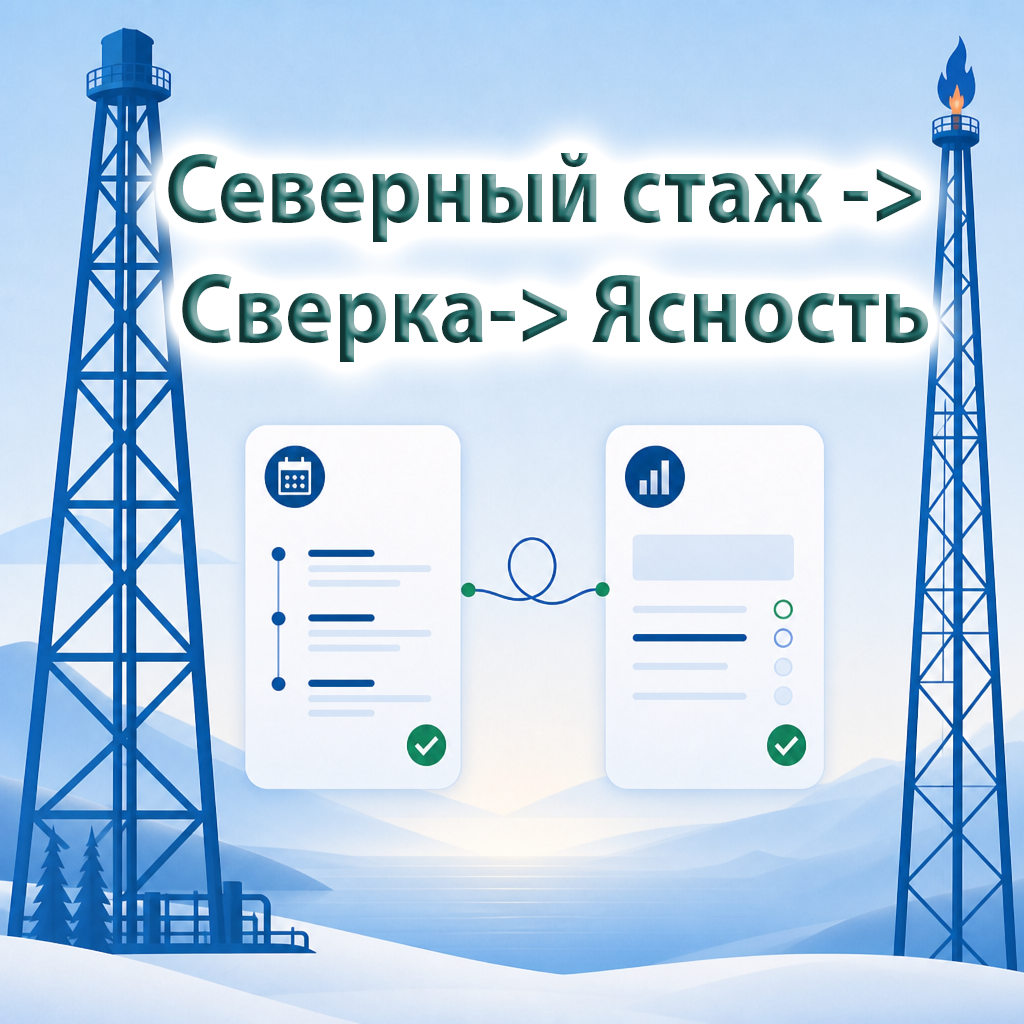
<style>
.page{position:relative;width:1024px;height:1024px}
.page>*{position:absolute;margin:0}
.t1{font:100px "MyriadPro-Bold";scale:0.92 1}
</style>
<div class="page">
<p class="t1" style="left:168px;top:153px;width:760px;height:209px;text-align:center">Северный стаж -&gt; <br>Сверка-&gt; Ясность</p>
</div>
